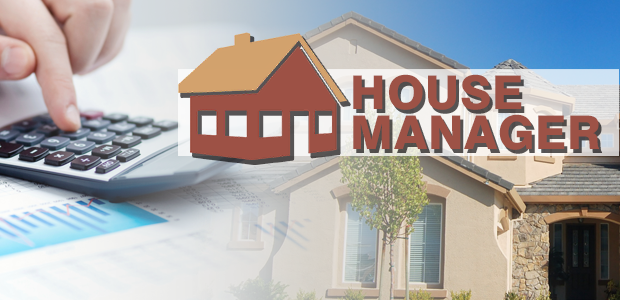
<style>
.page{position:relative;width:620px;height:300px}
.page>*{position:absolute;margin:0}
.t1{font:46.4px/40px "Swiss721BT-Heavy";letter-spacing:0.02em;color:#9d5246}
</style>
<div class="page">
<p class="t1" style="left:353px;top:74px;width:246px;height:76px">HOUSE<br>MANAGER</p>
</div>
